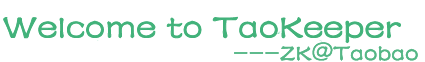
<style>
.page{position:relative;width:425px;height:62px;background:#ffffff}
.page>*{position:absolute;margin:0}
.t1{font:36px "FZSTK--GBK1-0";color:#42b27a;font-weight:bold}
.t2{font:24px "FZSTK--GBK1-0";color:#54b685;font-weight:bold}
</style>
<div class="page">
<p class="t1" style="left:3px;top:16px;width:398px;height:28px">Welcome to TaoKeeper</p>
<p class="t2" style="left:234px;top:42px;width:184px;height:19px">---ZK@Taobao</p>
</div>
